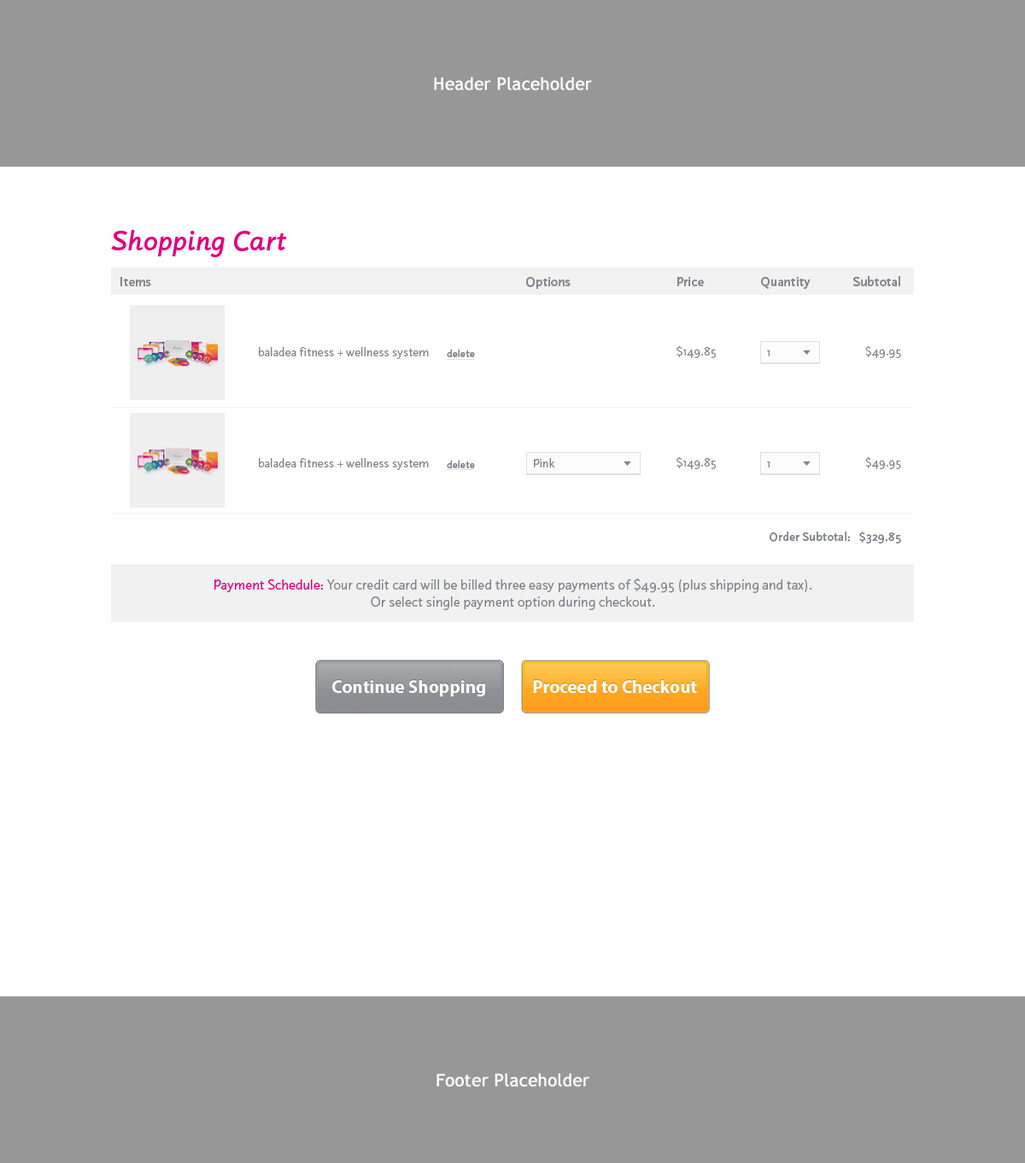
<style>
.page{position:relative;width:1025px;height:1163px;background:#ffffff}
.page>*{position:absolute;margin:0}
.t1{font:17.1px "TrebuchetMS";color:#ffffff;font-weight:bold}
.t2{font:27.3px "LuxSans-MediumItalic";color:#df007e}
.t3{font:12.8px "LuxSans-Medium";color:#81848a}
.t4{font:12px "LuxSans-Book";color:#81848a}
.t5{font:10.3px "LuxSans-Medium";color:#81848a;text-decoration:underline}
.t6{font:12.1px "LuxSans-Book";color:#81848a}
.t7{font:12px "LuxSans-Medium";color:#81848a}
.t8{font:13.7px/17px "LuxSans-Book";color:#81848a}
.t9{font:13.7px/17px "LuxSans-Book";color:#e6007e}
.t10{font:17.9px "MyriadPro-Bold";color:#ffffff}
</style>
<div class="page">
<p class="t1" style="left:434px;top:77px;width:158px;height:14px">Header Placeholder</p>
<p class="t2" style="left:111px;top:230px;width:176px;height:27px">Shopping Cart</p>
<p class="t3" style="left:120px;top:277px;width:31px;height:9px">Items</p>
<p class="t3" style="left:526px;top:277px;width:45px;height:12px">Options</p>
<p class="t3" style="left:678px;top:277px;width:26px;height:9px">Price</p>
<p class="t3" style="left:761px;top:277px;width:50px;height:12px">Quantity</p>
<p class="t3" style="left:854px;top:276px;width:47px;height:10px">Subtotal</p>
<p class="t4" style="left:259px;top:347px;width:170px;height:12px">baladea fitness + wellness system</p>
<p class="t5" style="left:447px;top:349px;width:28px;height:11px">delete</p>
<p class="t4" style="left:677px;top:346px;width:39px;height:12px">$149.85</p>
<p class="t4" style="left:767px;top:350px;width:3px;height:6px">1</p>
<p class="t4" style="left:866px;top:346px;width:35px;height:12px">$49.95</p>
<p class="t4" style="left:259px;top:458px;width:170px;height:12px">baladea fitness + wellness system</p>
<p class="t5" style="left:447px;top:461px;width:28px;height:9px">delete</p>
<p class="t6" style="left:534px;top:458px;width:21px;height:9px">Pink</p>
<p class="t4" style="left:677px;top:457px;width:39px;height:12px">$149.85</p>
<p class="t4" style="left:767px;top:461px;width:3px;height:6px">1</p>
<p class="t4" style="left:866px;top:457px;width:35px;height:12px">$49.95</p>
<p class="t7" style="left:770px;top:531px;width:131px;height:12px">Order Subtotal:   $329.85</p>
<p class="t8" style="left:214px;top:578px;width:599px;height:32px;text-align:center"><span class="t9">Payment Schedule: </span>Your credit card will be billed three easy payments of $49.95 (plus shipping and tax). <br>Or select single payment option during checkout.</p>
<p class="t10" style="left:332px;top:679px;width:153px;height:17px">Continue Shopping</p>
<p class="t10" style="left:332px;top:680px;width:153px;height:16px">Continue Shopping</p>
<p class="t10" style="left:533px;top:679px;width:164px;height:13px">Proceed to Checkout</p>
<p class="t10" style="left:533px;top:680px;width:164px;height:13px">Proceed to Checkout</p>
<p class="t1" style="left:437px;top:1073px;width:153px;height:14px">Footer Placeholder</p>
</div>
